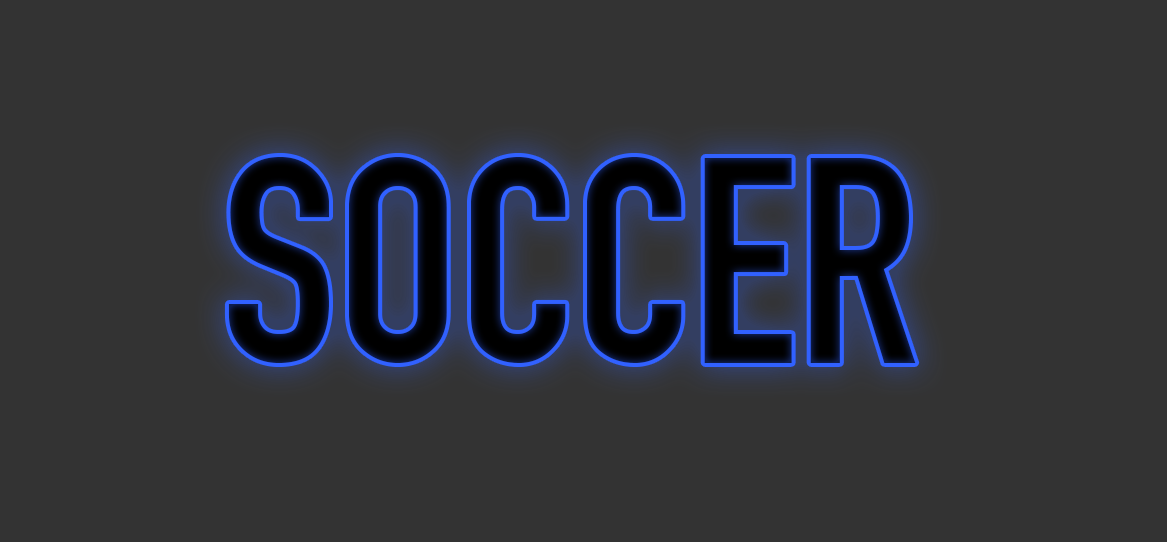
<style>
.page{position:relative;width:1167px;height:542px;background:#333333}
.page>*{position:absolute;margin:0}
.t1{font:285.8px "DINEngschrift";color:#010205}
</style>
<div class="page">
<p class="t1" style="left:228px;top:157px;width:688px;height:206px">SOCCER</p>
</div>
